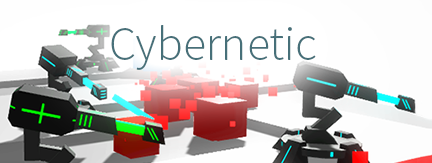
<style>
.page{position:relative;width:432px;height:163px;background:#ffffff}
.page>*{position:absolute;margin:0}
.t1{font:48px "SourceSansPro-Light";color:#477079}
</style>
<div class="page">
<p class="t1" style="left:111px;top:25px;width:205px;height:45px">Cybernetic</p>
</div>
